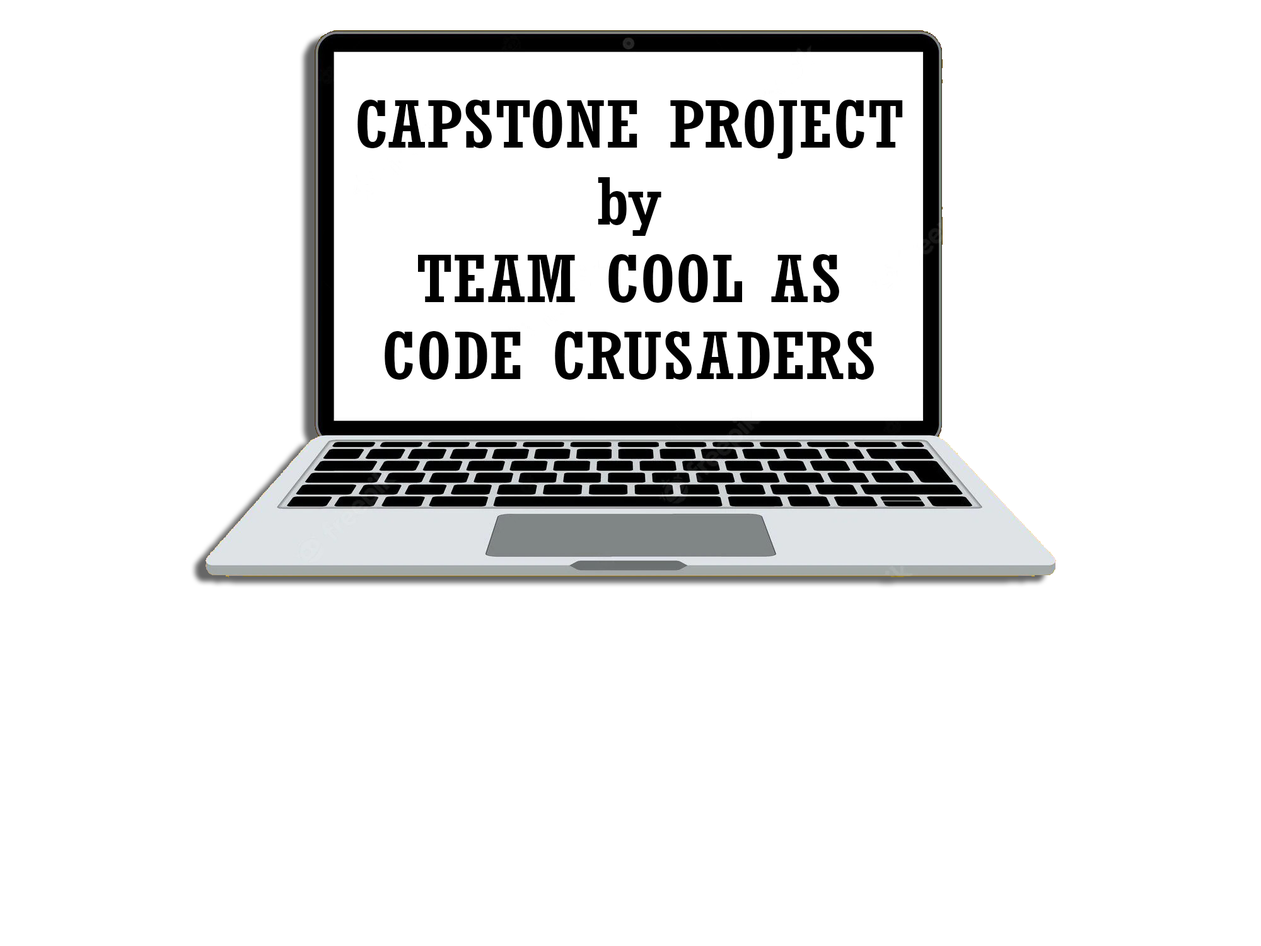
<style>
.page{position:relative;width:1261px;height:946px;background:#ffffff}
.page>*{position:absolute;margin:0}
.t1{font:64.4px "Rockwell-Condensed";color:#000000;scale:1.33 1}
</style>
<div class="page">
<p class="t1" style="left:357px;top:100px;width:546px;height:280px;text-align:center">CAPSTONE PROJECT<br>by<br>TEAM COOL AS<br>CODE CRUSADERS</p>
</div>
